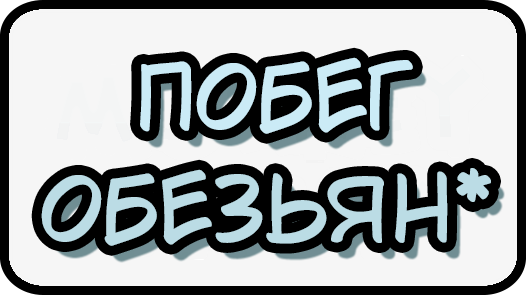
<style>
.page{position:relative;width:526px;height:295px;background:#f6f6f6}
.page>*{position:absolute;margin:0}
.t1{font:82px/112px "TroubleSide";color:#bddbe5}
</style>
<div class="page">
<p class="t1" style="left:41px;top:57px;width:450px;height:189px;text-align:center">побег обезьян*</p>
</div>
